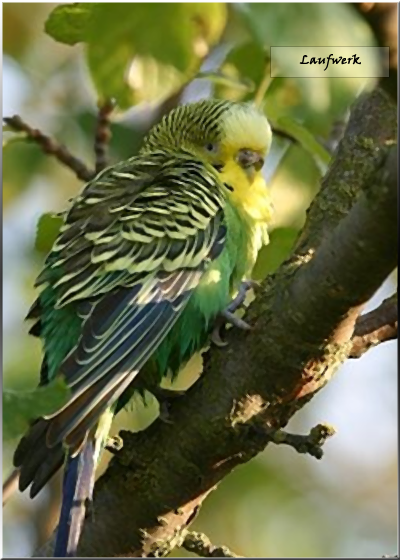
<style>
.page{position:relative;width:400px;height:560px}
.page>*{position:absolute;margin:0}
.t1{font:12px "VinerHandITC";letter-spacing:0.01em;color:#000000;font-weight:bold}
</style>
<div class="page">
<p class="t1" style="left:299px;top:54px;width:62px;height:17px">Laufwerk</p>
</div>
